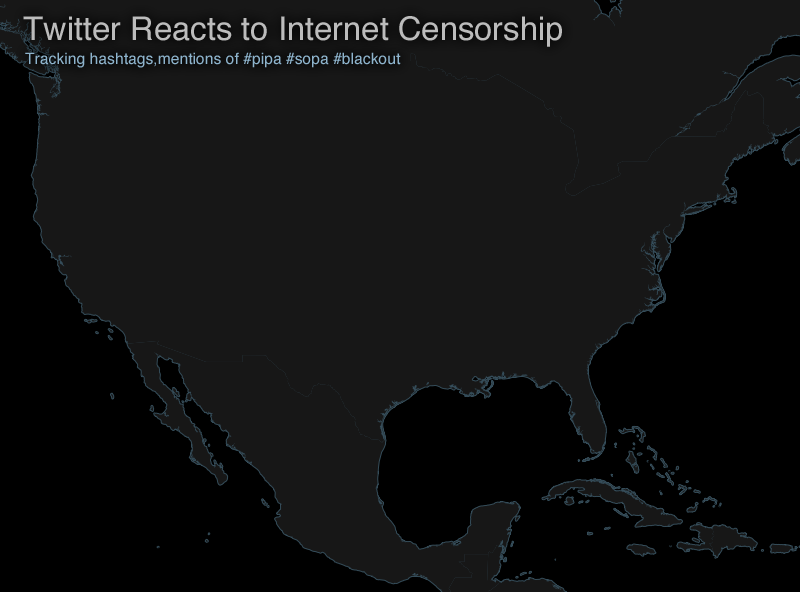
<style>
.page{position:relative;width:800px;height:592px;background:#171717}
.page>*{position:absolute;margin:0}
.t1{font:32.7px "Helvetica";color:#bcbcbc}
.t2{font:15.7px "Helvetica";color:#8eb4cd}
</style>
<div class="page">
<p class="t1" style="left:23px;top:16px;width:539px;height:31px">Twitter Reacts to Internet Censorship</p>
<p class="t2" style="left:25px;top:52px;width:376px;height:16px">Tracking hashtags,mentions of #pipa #sopa #blackout</p>
</div>
